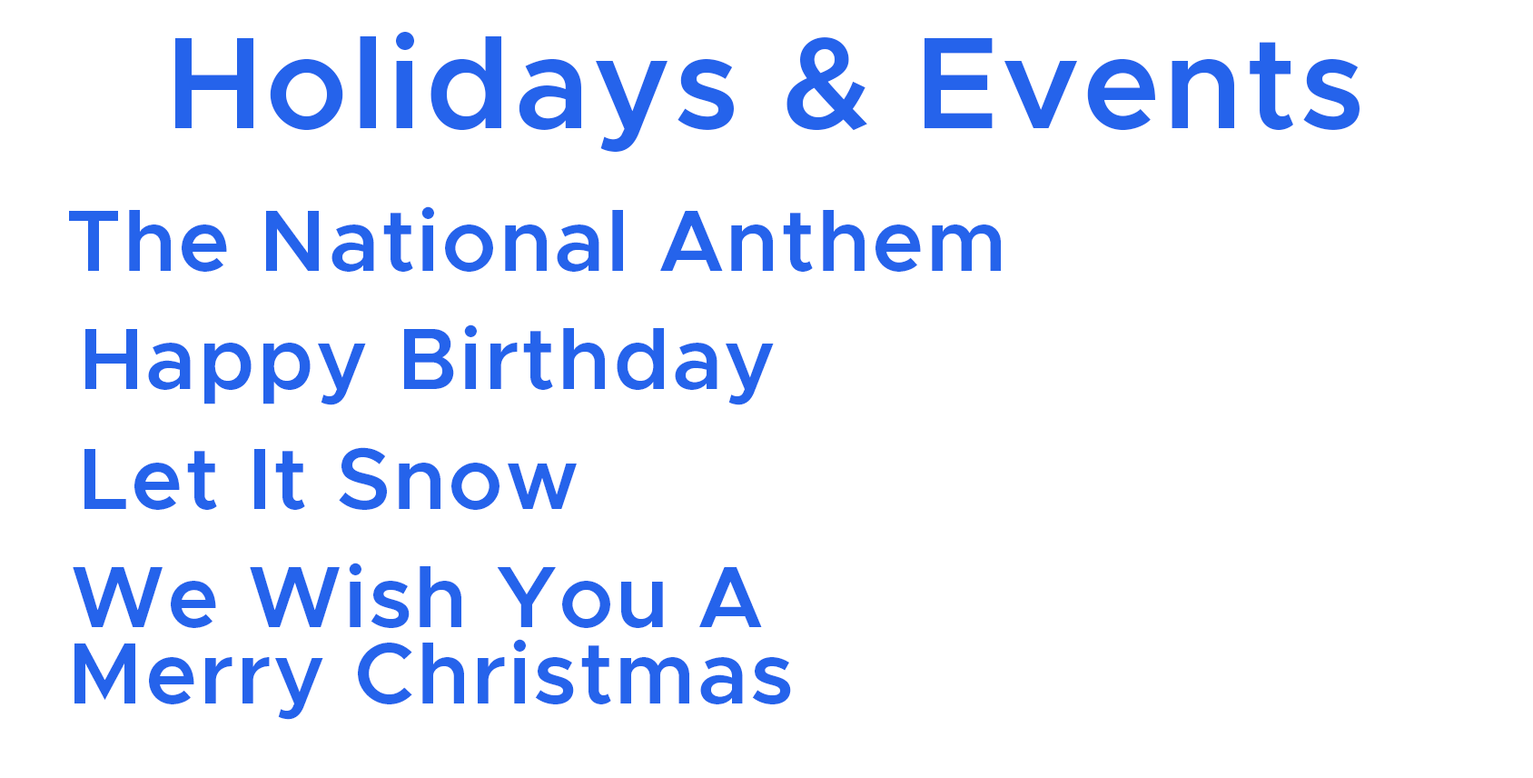
<style>
.page{position:relative;width:1533px;height:778px;background:#ffffff}
.page>*{position:absolute;margin:0}
.t1{font:130.8px "Metropolis-SemiBold";letter-spacing:0.025em;color:#2563eb}
.t2{font:87.2px "Metropolis-SemiBold";letter-spacing:0.025em;color:#2563eb}
.t3{font:87.2px/12.7px "Metropolis-SemiBold";letter-spacing:0.025em;color:#2563eb}
</style>
<div class="page">
<p class="t1" style="left:175px;top:32px;width:1185px;height:120px">Holidays &amp; Events</p>
<p class="t2" style="left:69px;top:206px;width:932px;height:66px">The National Anthem</p>
<p class="t2" style="left:85px;top:324px;width:689px;height:81px">Happy Birthday</p>
<p class="t2" style="left:84px;top:447px;width:493px;height:63px">Let It Snow</p>
<p class="t3" style="left:73px;top:562px;width:718px;height:157px;text-align:center">We Wish You A <br><br><br><br><br><br>Merry Christmas</p>
</div>
